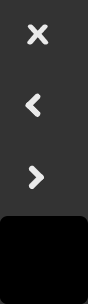
<style>
.page{position:relative;width:88px;height:304px;background:#333333}
.page>*{position:absolute;margin:0}
.t1{font:37.1px "ArialRoundedMTBold";color:#eaeaea;scale:1.21 1}
</style>
<div class="page">
<p class="t1" style="left:27px;top:24px;width:22px;height:21px">x</p>
</div>
